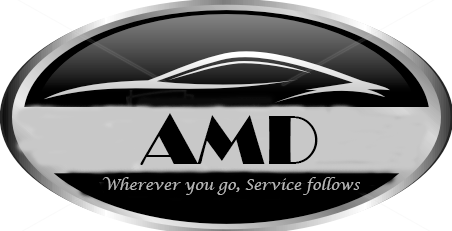
<style>
.page{position:relative;width:452px;height:231px}
.page>*{position:absolute;margin:0}
.t1{font:14.7px "LucidaCalligraphy-Italic";color:#b6b6b6}
</style>
<div class="page">
<p class="t1" style="left:102px;top:177px;width:258px;height:18px">Wherever you go, Service follows</p>
</div>
